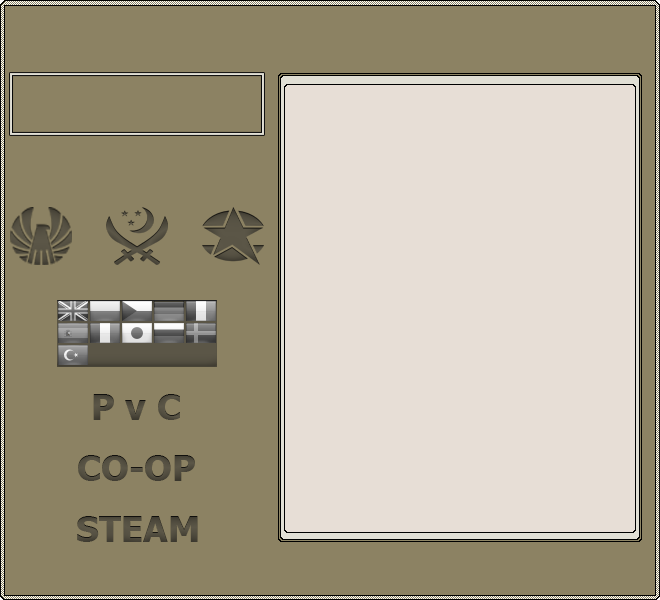
<style>
.page{position:relative;width:660px;height:600px;background:#8c8263}
.page>*{position:absolute;margin:0}
.t1{font:36px "Tahoma-Bold";color:#504c3f}
.t2{font:36px "Tahoma-Bold";color:#514d3f}
.t3{font:36px "Tahoma-Bold";color:#514c3f}
</style>
<div class="page">
<p class="t1" style="left:93px;top:394px;width:87px;height:26px">P v C</p>
<p class="t2" style="left:78px;top:455px;width:117px;height:26px">CO-OP</p>
<p class="t3" style="left:77px;top:516px;width:121px;height:26px">STEAM</p>
</div>
